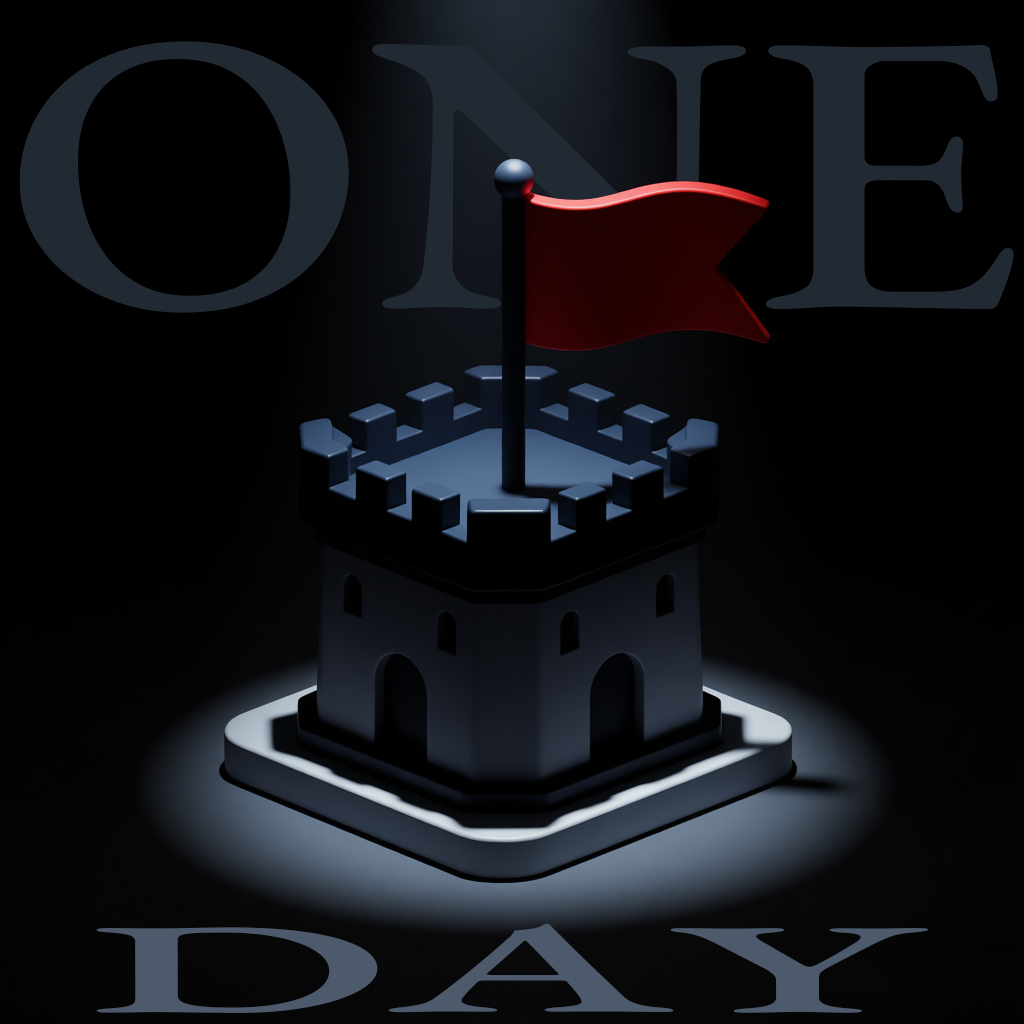
<style>
.page{position:relative;width:1024px;height:1024px}
.page>*{position:absolute;margin:0}
.t1{font:400px "EBGaramondRoman-Medium";color:#212932;scale:1.2 1}
.t2{font:128.3px "EBGaramondRoman-Medium";color:#4c5a6b;scale:3.12 1}
</style>
<div class="page">
<p class="t1" style="left:19px;top:41px;width:995px;height:274px">ONE</p>
<p class="t2" style="left:96px;top:923px;width:832px;height:90px">DAY</p>
</div>
